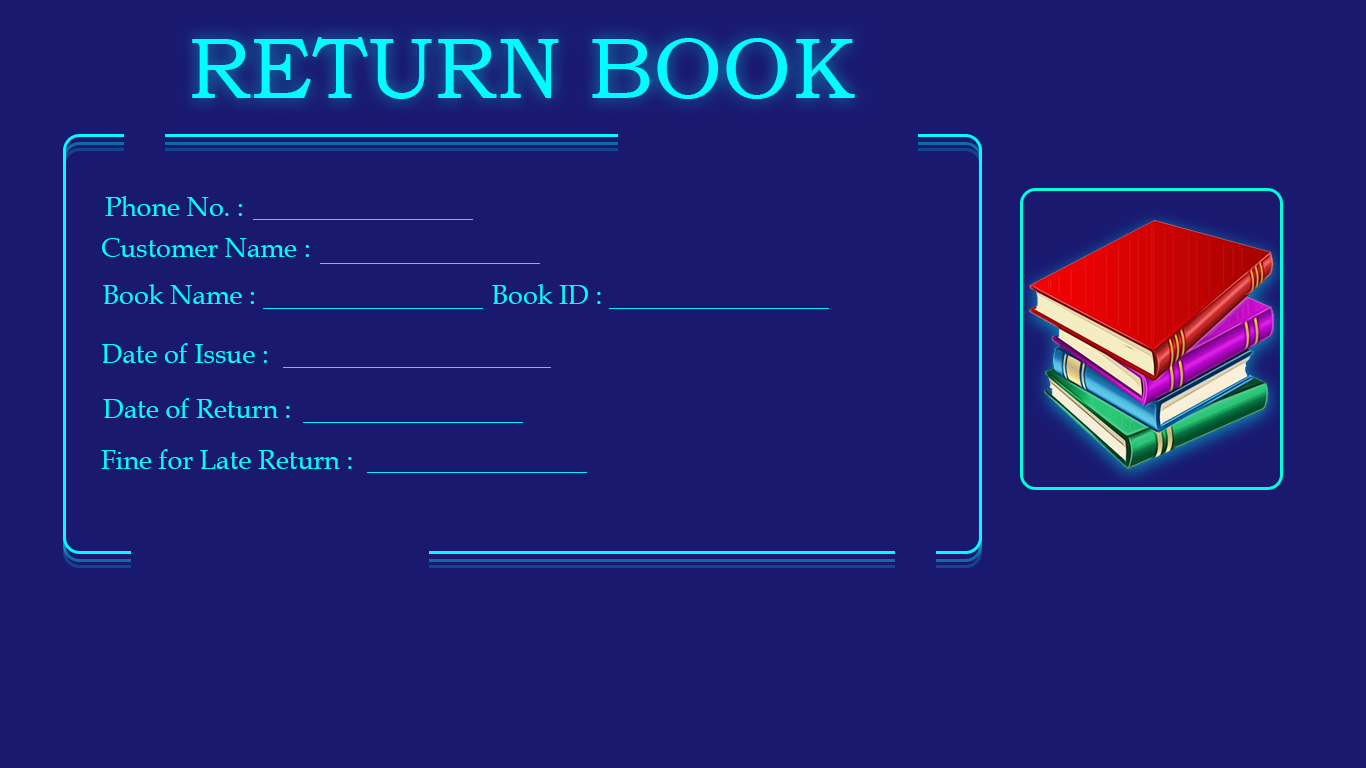
<style>
.page{position:relative;width:1366px;height:768px;background:#191970}
.page>*{position:absolute;margin:0}
.t1{font:86.7px "BookmanOldStyle";color:#00fcff}
.t2{font:26.9px "BookAntiqua";color:#00fcff}
</style>
<div class="page">
<p class="t1" style="left:192px;top:37px;width:663px;height:62px">RETURN BOOK</p>
<p class="t2" style="left:105px;top:196px;width:137px;height:20px">Phone No. :</p>
<p class="t2" style="left:102px;top:238px;width:207px;height:19px">Customer Name :</p>
<p class="t2" style="left:103px;top:284px;width:151px;height:20px">Book Name :</p>
<p class="t2" style="left:492px;top:284px;width:109px;height:20px">Book ID :</p>
<p class="t2" style="left:102px;top:343px;width:165px;height:20px">Date of Issue :</p>
<p class="t2" style="left:103px;top:398px;width:187px;height:20px">Date of Return :</p>
<p class="t2" style="left:101px;top:449px;width:251px;height:20px">Fine for Late Return :</p>
</div>
